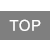
<style>
.page{position:relative;width:50px;height:40px;background:#7f7f7f}
.page>*{position:absolute;margin:0}
.t1{font:15px "ArialMT";letter-spacing:0.03em;color:#ffffff}
</style>
<div class="page">
<p class="t1" style="left:9px;top:19px;width:32px;height:12px">TOP</p>
</div>
